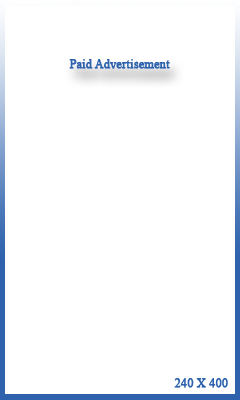
<style>
.page{position:relative;width:240px;height:400px;background:#ffffff}
.page>*{position:absolute;margin:0}
.t1{font:12px "TimesNewRomanPSMT";color:#2e62ad;font-weight:bold}
</style>
<div class="page">
<p class="t1" style="left:69px;top:59px;width:101px;height:10px">Paid Advertisement</p>
<p class="t1" style="left:174px;top:378px;width:54px;height:10px">240 X 400</p>
</div>
